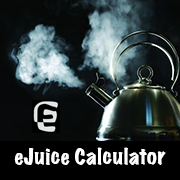
<style>
.page{position:relative;width:180px;height:180px}
.page>*{position:absolute;margin:0}
.t1{font:20px "MarkerFelt-Wide";color:#ffffff}
</style>
<div class="page">
<p class="t1" style="left:14px;top:147px;width:152px;height:18px">eJuice Calculator</p>
</div>
